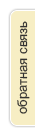
<style>
.page{position:relative;width:35px;height:135px;background:#f7eec4}
.page>*{position:absolute;margin:0}
.t1{font:13px "ArialMT";color:#333333}
</style>
<div class="page">
<p class="t1" style="left:17px;top:21px;width:13px;height:93px;rotate:-90deg">обратная связь</p>
</div>
